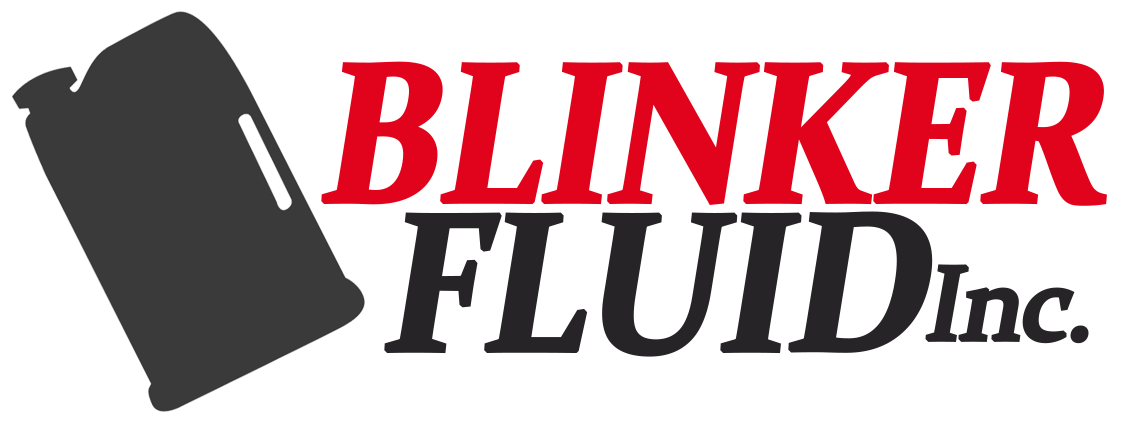
<style>
.page{position:relative;width:1144px;height:433px;background:#ffffff}
.page>*{position:absolute;margin:0}
.t1{font:199px "Constantia-Bold";letter-spacing:-0.04em;color:#e0031b;font-weight:bold;font-style:italic;scale:0.91 1}
.t2{font:197px "Constantia-Bold";letter-spacing:-0.04em;color:#272428;font-weight:bold;font-style:italic;scale:0.91 1}
.t3{font:105px "Constantia";letter-spacing:-0.04em;color:#272428;font-weight:bold;font-style:italic}
</style>
<div class="page">
<p class="t1" style="left:321px;top:61px;width:786px;height:145px">BLINKER</p>
<p class="t2" style="left:384px;top:211px;width:549px;height:146px">FLUID</p>
<p class="t3" style="left:925px;top:264px;width:164px;height:80px">Inc.</p>
</div>
